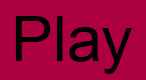
<style>
.page{position:relative;width:146px;height:80px;background:#ad0041}
.page>*{position:absolute;margin:0}
.t1{font:62.5px "ArialMT";color:#000000}
</style>
<div class="page">
<p class="t1" style="left:15px;top:16px;width:117px;height:58px">Play</p>
</div>
